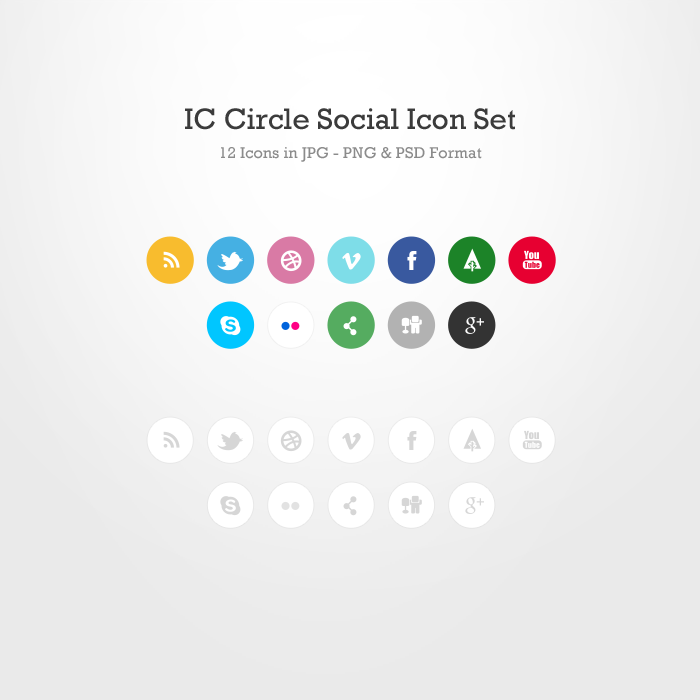
<style>
.page{position:relative;width:700px;height:700px}
.page>*{position:absolute;margin:0}
.t1{font:30px "Rockwell";color:#3b3b3b}
.t2{font:16px "Rockwell";letter-spacing:0.005em;color:#8b8b8b}
.t3{font:14.8px "ArialMT";color:#ffffff}
.t4{font:14.8px "ArialMT";color:#d6d6d6}
</style>
<div class="page">
<p class="t1" style="left:185px;top:108px;width:330px;height:22px">IC Circle Social Icon Set</p>
<p class="t2" style="left:221px;top:147px;width:261px;height:15px">12 Icons in JPG - PNG &amp; PSD Format</p>
<p class="t3" style="left:476px;top:318px;width:8px;height:8px">+</p>
<p class="t4" style="left:476px;top:498px;width:8px;height:8px">+</p>
</div>
